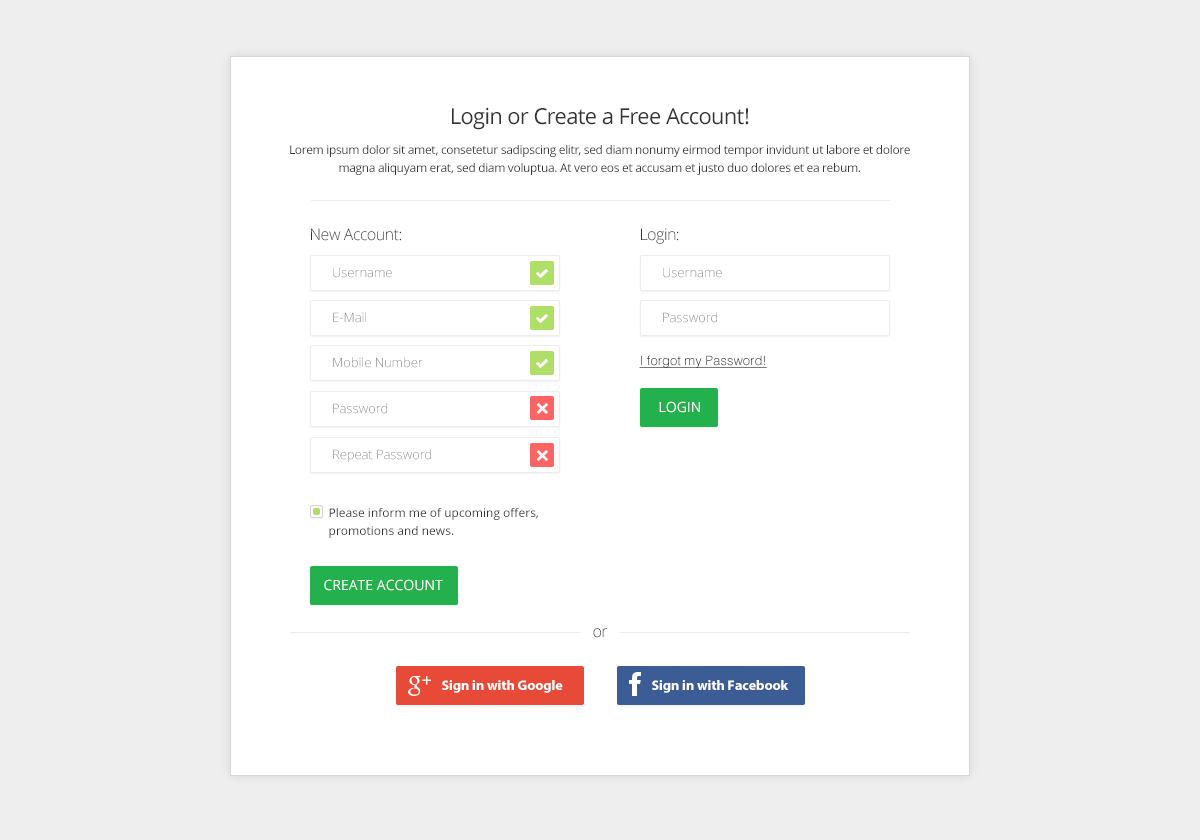
<style>
.page{position:relative;width:1200px;height:840px;background:#ffffff}
.page>*{position:absolute;margin:0}
.t1{font:12px/30px "OpenSans";letter-spacing:-0.025em;color:#333333}
.t2{font:22px/40px "OpenSans";letter-spacing:-0.025em;color:#333333}
.t3{font:12px/18px "OpenSans";letter-spacing:-0.025em;color:#333333}
.t4{font:16px "OpenSans-Light";letter-spacing:-0.025em;color:#333333}
.t5{font:13px "OpenSans-Light";color:#888888}
.t6{font:13px "OpenSans-Light"}
.t7{font:13px "Helvetica-Light";color:#333333;text-decoration:underline}
.t8{font:14px "OpenSans";color:#ffffff;text-transform:uppercase}
.t9{font:12px/18px "OpenSans";color:#333333}
.t10{font:16px "OpenSans-Light";letter-spacing:-0.025em}
.t11{font:14px "MyriadPro-Bold";color:#ffffff}
</style>
<div class="page">
<p class="t1" style="left:290px;top:107px;width:620px;height:68px;text-align:center"><span class="t2">Login or Create a Free Account!<br></span>Lorem ipsum dolor sit amet, consetetur sadipscing elitr, sed diam nonumy eirmod tempor invidunt ut labore et dolore<br><span class="t3">magna aliquyam erat, sed diam voluptua. At vero eos et accusam et justo duo dolores et ea rebum.</span></p>
<p class="t4" style="left:311px;top:228px;width:90px;height:13px">New Account:</p>
<p class="t4" style="left:641px;top:228px;width:38px;height:16px">Login:</p>
<p class="t5" style="left:333px;top:267px;width:59px;height:11px">Username</p>
<p class="t5" style="left:663px;top:267px;width:59px;height:11px">Username</p>
<p class="t5" style="left:333px;top:312px;width:33px;height:11px">E-Mail</p>
<p class="t6" style="left:663px;top:312px;width:54px;height:11px">Password</p>
<p class="t5" style="left:333px;top:357px;width:90px;height:11px">Mobile Number</p>
<p class="t7" style="left:639px;top:355px;width:128px;height:13px">I forgot my Password!</p>
<p class="t8" style="left:659px;top:401px;width:41px;height:12px">Login</p>
<p class="t6" style="left:333px;top:403px;width:54px;height:11px">Password</p>
<p class="t6" style="left:333px;top:449px;width:98px;height:13px">Repeat Password</p>
<p class="t9" style="left:329px;top:508px;width:209px;height:30px">Please inform me of upcoming offers,<br>promotions and news.</p>
<p class="t8" style="left:324px;top:579px;width:119px;height:12px">Create Account</p>
<p class="t10" style="left:593px;top:628px;width:15px;height:10px">or</p>
<p class="t11" style="left:442px;top:680px;width:121px;height:13px">Sign in with Google</p>
<p class="t11" style="left:652px;top:680px;width:137px;height:13px">Sign in with Facebook</p>
</div>
